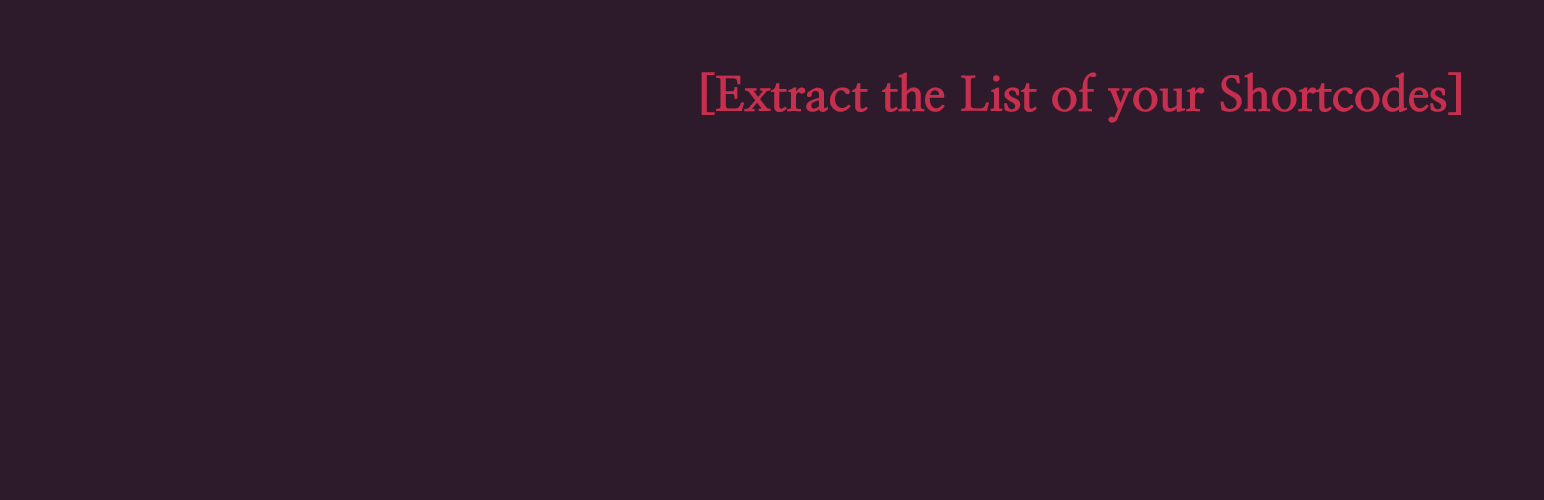
<style>
.page{position:relative;width:1544px;height:500px;background:#2d1b2b}
.page>*{position:absolute;margin:0}
.t1{font:48px "NanumMyeongjoExtraBold";color:#c62f4e}
</style>
<div class="page">
<p class="t1" style="left:701px;top:72px;width:760px;height:51px">[Extract the List of your Shortcodes]</p>
</div>
